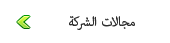
<style>
.page{position:relative;width:170px;height:43px;background:#ffffff}
.page>*{position:absolute;margin:0}
.t1{font:18px "AdobeArabic-Regular";color:#2f2f2f}
</style>
<div class="page">
<p class="t1" style="left:69px;top:16px;width:66px;height:14px">مجالات الشركة</p>
</div>
